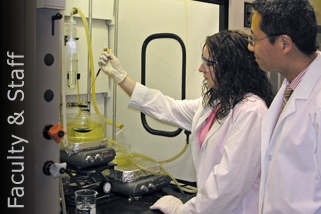
<style>
.page{position:relative;width:321px;height:214px}
.page>*{position:absolute;margin:0}
.t1{font:22px "Tahoma";letter-spacing:0.05em;color:#babab9}
</style>
<div class="page">
<p class="t1" style="left:7px;top:51px;width:22px;height:157px;rotate:-90deg">Faculty &amp; Staff</p>
</div>
